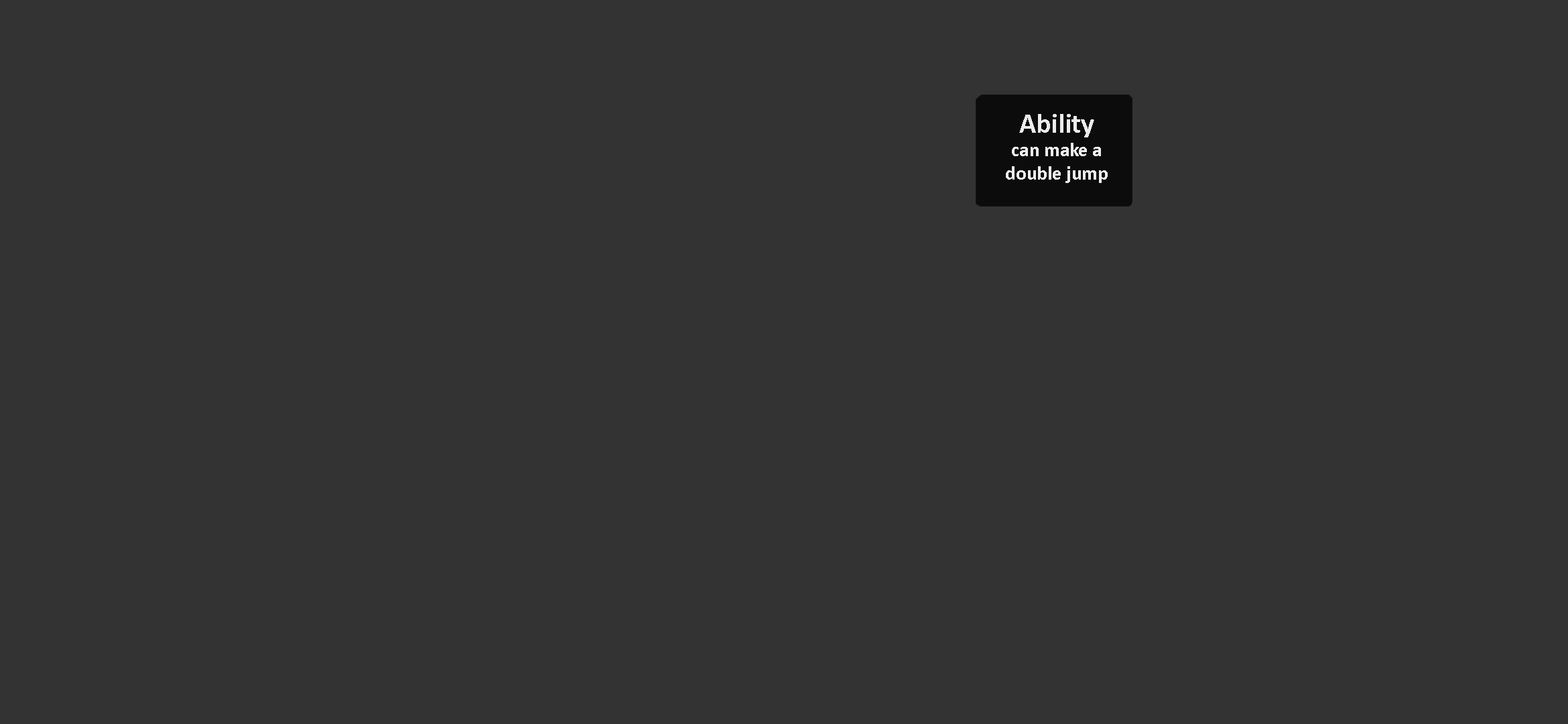
<style>
.page{position:relative;width:1568px;height:724px;background:#333333}
.page>*{position:absolute;margin:0}
.t1{font:19.5px "Calibri-Bold";color:#ffffff}
.t2{font:27.9px "Calibri-Bold";color:#ffffff}
</style>
<div class="page">
<p class="t1" style="left:1006px;top:114px;width:102px;height:69px;text-align:center;opacity:0.89"><span class="t2">Ability<br></span>can make a <br>double jump</p>
</div>
